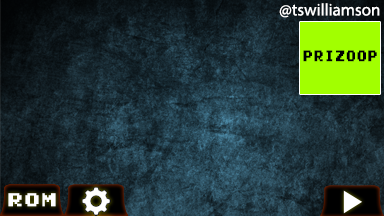
<style>
.page{position:relative;width:384px;height:216px}
.page>*{position:absolute;margin:0}
.t1{font:17px "MyriadPro-Regular";color:#ffffff}
.t2{font:14px "Early-GameBoy";color:#000000;scale:0.77 1}
</style>
<div class="page">
<p class="t1" style="left:279px;top:3px;width:101px;height:15px">@tswilliamson</p>
<p class="t2" style="left:303px;top:50px;width:74px;height:12px">PRIZOOP</p>
</div>
